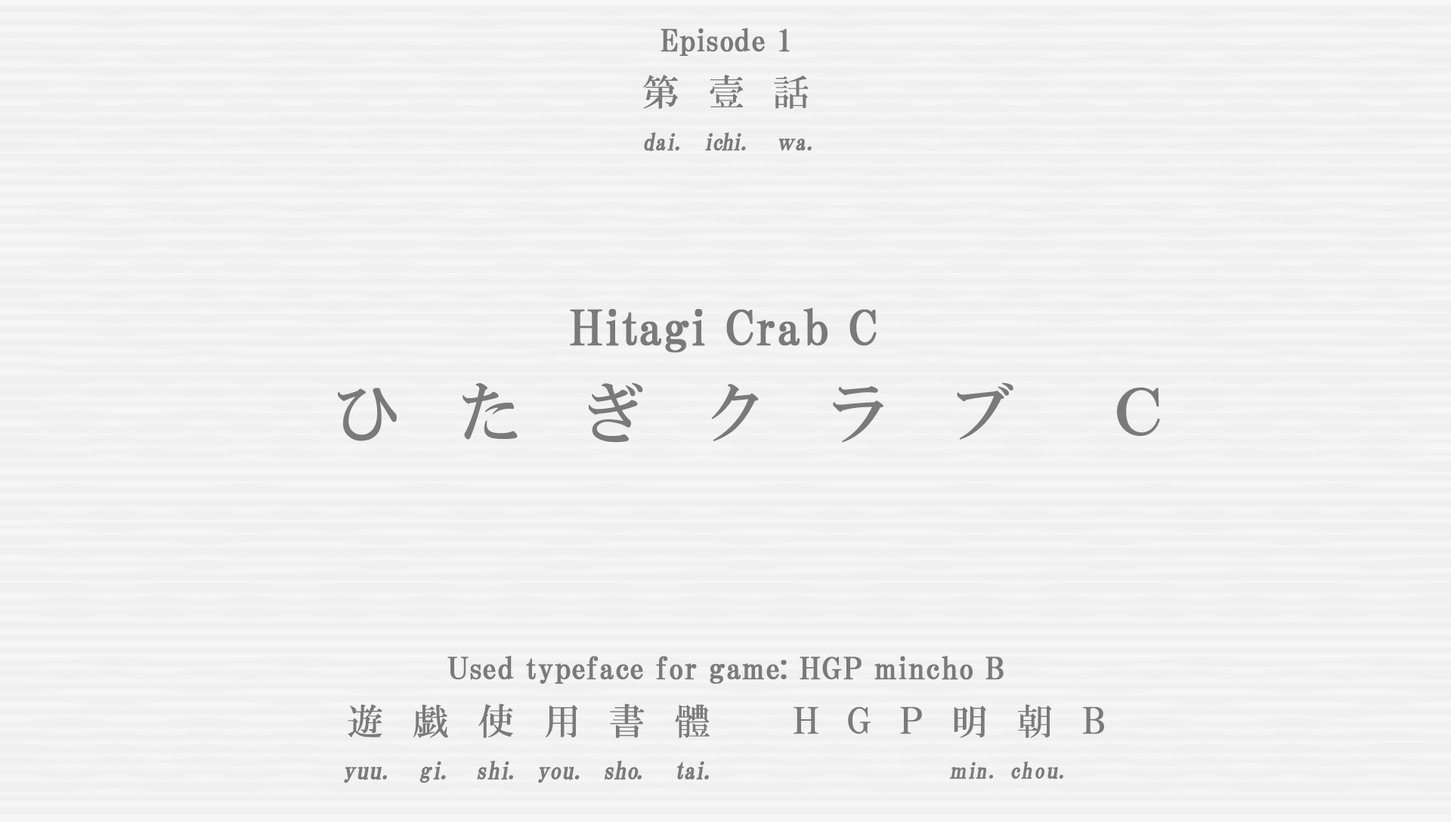
<style>
.page{position:relative;width:1451px;height:822px;background:#f0f0f0}
.page>*{position:absolute;margin:0}
.t1{font:30.2px "HGPMinchoB";letter-spacing:0.01em;color:#7a7a7a;font-weight:bold}
.t2{font:36.5px "HGMinchoB";letter-spacing:0.79em;color:#7a7a7a}
.t3{font:23.2px "HGMinchoB";letter-spacing:-0.1em;color:#7a7a7a;font-weight:bold;scale:0.96 1}
.t4{font:23.2px "HGMinchoB";color:#7a7a7a;font-weight:bold;scale:0.96 1}
.t5{font:23.2px "HGMinchoB";letter-spacing:-0.075em;color:#7a7a7a;font-weight:bold;scale:0.96 1}
.t6{font:23.2px "HGMinchoB";letter-spacing:0.07em;color:#7a7a7a;font-weight:bold;scale:0.96 1}
.t7{font:23.2px "HGMinchoB";letter-spacing:-0.05em;color:#7a7a7a;font-weight:bold;scale:0.86 1}
.t8{font:48.4px "HGPMinchoB";letter-spacing:0.01em;color:#7a7a7a;font-weight:bold}
.t9{font:65.7px "HGMinchoB";letter-spacing:0.87em;color:#7a7a7a}
.t10{font:65.7px "HGMinchoB";letter-spacing:1.39em;color:#7a7a7a}
.t11{font:65.7px "HGMinchoB";letter-spacing:0.99em;color:#7a7a7a}
.t12{font:36.3px "HGMinchoB";letter-spacing:0.81em;color:#7a7a7a}
.t13{font:36.3px "HGMinchoB";letter-spacing:0.8em;color:#7a7a7a}
.t14{font:36.3px "HGMinchoB";letter-spacing:0.79em;color:#7a7a7a}
.t15{font:36.3px "HGMinchoB";letter-spacing:0.71em;color:#7a7a7a;scale:0.85 1}
.t16{font:36.3px "HGMinchoB";letter-spacing:0.53em;color:#7a7a7a}
.t17{font:24.2px "HGMinchoB";color:#7a7a7a;font-weight:bold}
.t18{font:24.2px "HGMinchoB";letter-spacing:0.025em;color:#7a7a7a;font-weight:bold;scale:0.96 1}
.t19{font:24.2px "HGMinchoB";letter-spacing:0.075em;color:#7a7a7a;font-weight:bold;scale:0.96 1}
.t20{font:24.2px "HGMinchoB";letter-spacing:-0.025em;color:#7a7a7a;font-weight:bold;scale:0.96 1}
.t21{font:24.2px "HGMinchoB";letter-spacing:-0.11em;color:#7a7a7a;font-weight:bold;scale:0.96 1}
.t22{font:24.2px "HGMinchoB";color:#7a7a7a;font-weight:bold;scale:0.96 1}
.t23{font:24.2px "HGMinchoB";letter-spacing:-0.05em;color:#7a7a7a;font-weight:bold;scale:0.96 1}
.t24{font:24.2px "HGMinchoB";letter-spacing:-0.12em;color:#7a7a7a;font-weight:bold;scale:0.96 1}
.t25{font:24.2px "HGMinchoB";letter-spacing:-0.01em;color:#7a7a7a;font-weight:bold;scale:0.96 1}
.t26{font:24.2px "HGMinchoB";letter-spacing:0.005em;color:#7a7a7a;font-weight:bold;scale:0.96 1}
.t27{font:24.2px "HGMinchoB";letter-spacing:-0.09em;color:#7a7a7a;font-weight:bold;scale:0.96 1}
.t28{font:24.2px "HGMinchoB";letter-spacing:-0.075em;color:#7a7a7a;font-weight:bold;scale:0.96 1}
.t29{font:24.2px "HGMinchoB";letter-spacing:-0.1em;color:#7a7a7a;font-weight:bold;scale:0.96 1}
.t30{font:22px "HGMinchoB";letter-spacing:0.07em;color:#7a7a7a;font-weight:bold;scale:0.96 1}
.t31{font:22px "HGMinchoB";letter-spacing:-0.075em;color:#7a7a7a;font-weight:bold;scale:0.83 1}
.t32{font:22px "HGMinchoB";letter-spacing:-0.075em;color:#7a7a7a;font-weight:bold;scale:0.96 1}
.t33{font:22px "HGMinchoB";color:#7a7a7a;font-weight:bold;scale:0.96 1}
.t34{font:22px "HGMinchoB";letter-spacing:0.05em;color:#7a7a7a;font-weight:bold;scale:0.96 1}
.t35{font:22px "HGMinchoB";letter-spacing:0.01em;color:#7a7a7a;font-weight:bold;scale:1.06 1}
</style>
<div class="page">
<p class="t1" style="left:660px;top:28px;width:130px;height:28px">Episode 1</p>
<p class="t2" style="left:643px;top:75px;width:165px;height:34px">第壹話</p>
<p class="t3" style="left:644px;top:132px;width:167px;height:19px"><span class="t4">d</span><span class="t5">a</span>i<span class="t6">. </span>ichi<span class="t6">.  </span><span class="t7">ｗ</span><span class="t4">a</span><span class="t6">.</span></p>
<p class="t8" style="left:570px;top:308px;width:306px;height:45px">Hitagi Crab C</p>
<p class="t9" style="left:338px;top:382px;width:822px;height:61px">ひたぎクラ<span class="t10">ブ</span><span class="t11">Ｃ</span></p>
<p class="t1" style="left:447px;top:656px;width:556px;height:28px">Used typeface for game: HGP mincho B</p>
<p class="t12" style="left:348px;top:703px;width:361px;height:35px">遊<span class="t13">戯</span>使<span class="t14">用</span>書體</p>
<p class="t15" style="left:793px;top:706px;width:311px;height:28px">ＨＧＰ    Ｂ</p>
<p class="t14" style="left:953px;top:704px;width:98px;height:34px">明<span class="t16">朝</span></p>
<p class="t17" style="left:344px;top:760px;width:365px;height:23px"><span class="t18">y</span>uu<span class="t19">. </span><span class="t20">g</span><span class="t21">i</span><span class="t19">. </span><span class="t22">s</span><span class="t23">h</span><span class="t24">i</span><span class="t19">. </span><span class="t25">y</span><span class="t26">ou</span><span class="t19">. </span><span class="t20">s</span><span class="t22">h</span><span class="t27">o</span><span class="t19">.  </span><span class="t28">t</span><span class="t29">ai</span><span class="t19">.</span></p>
<p class="t30" style="left:950px;top:761px;width:113px;height:19px"><span class="t31">ｍ</span><span class="t32">i</span>n. <span class="t33">c</span>h<span class="t34">o</span><span class="t35">u</span>.</p>
</div>
